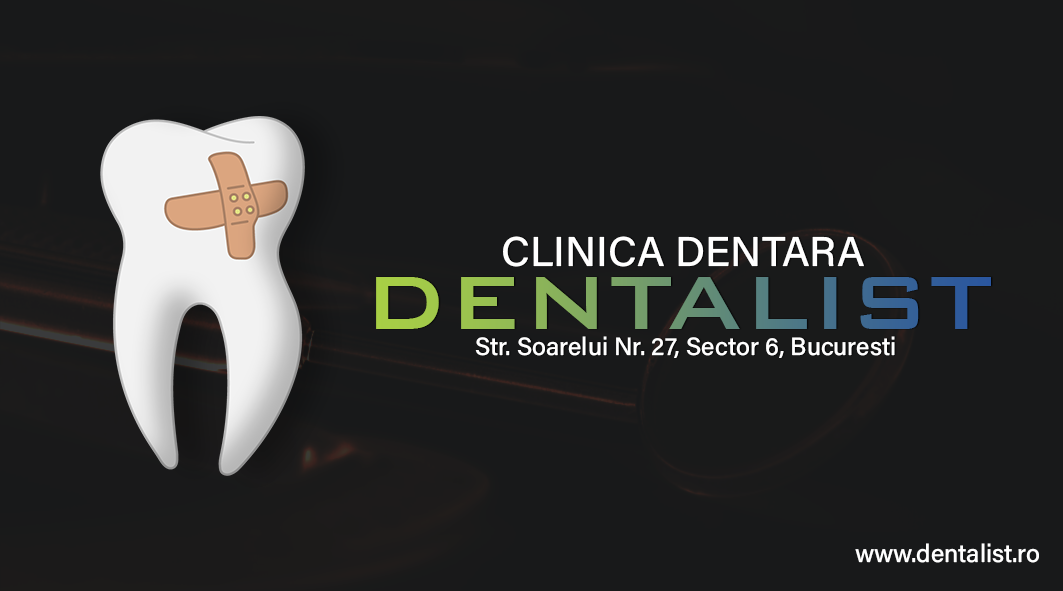
<style>
.page{position:relative;width:1063px;height:591px;background:#18191a}
.page>*{position:absolute;margin:0}
.t1{font:41.7px "AcuminConcept-Medium";color:#ffffff}
.t2{font:100px "BankGothicBT-Medium"}
.t3{font:25px "AcuminConcept-Medium";color:#ffffff}
</style>
<div class="page">
<p class="t1" style="left:503px;top:236px;width:361px;height:31px">CLINICA DENTARA</p>
<p class="t2" style="left:376px;top:277px;width:615px;height:52px">DENTALIST</p>
<p class="t3" style="left:475px;top:336px;width:420px;height:22px">Str. Soarelui Nr. 27, Sector 6, Bucuresti</p>
<p class="t3" style="left:855px;top:543px;width:184px;height:20px">www.dentalist.ro</p>
</div>
